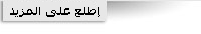
<style>
.page{position:relative;width:201px;height:34px;background:#ffffff}
.page>*{position:absolute;margin:0}
.t1{font:12px "Tahoma-Bold";color:#000000}
</style>
<div class="page">
<p class="t1" style="left:10px;top:7px;width:90px;height:10px">إطلع على المزيد</p>
</div>
